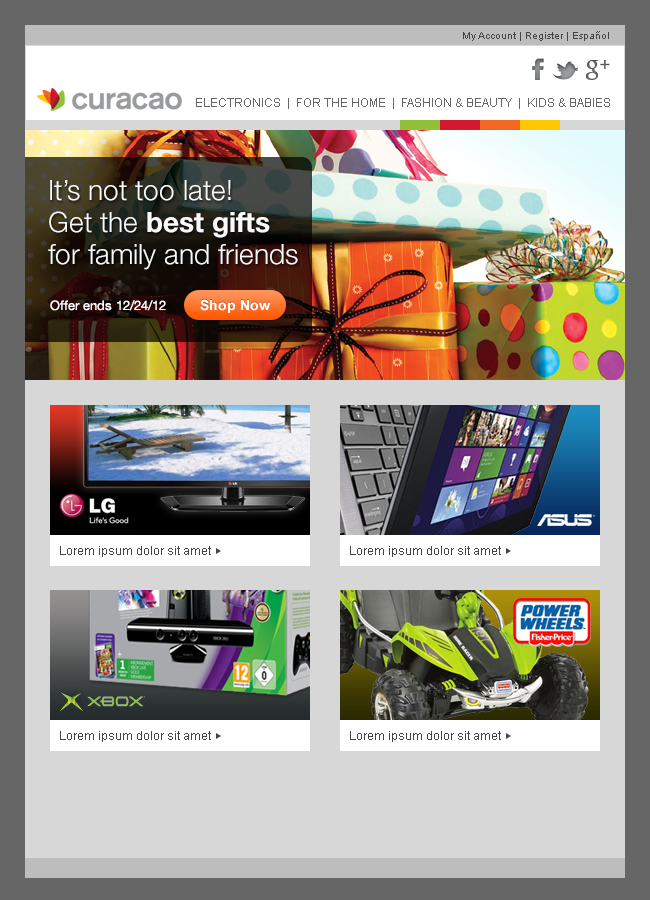
<style>
.page{position:relative;width:650px;height:900px;background:#d7d7d7}
.page>*{position:absolute;margin:0}
.t1{font:10px "ArialMT";color:#444444}
.t2{font:12px "ArialMT";color:#666666}
.t3{font:28px/32px "HelveticaNeue-Light";color:#ffffff}
.t4{font:28px/32px "HelveticaNeue-Bold";color:#ffffff}
.t5{font:13px "HelveticaNeue-Roman";color:#ffffff}
.t6{font:12px "ArialMT";color:#444444}
</style>
<div class="page">
<p class="t1" style="left:463px;top:31px;width:146px;height:10px">My Account | Register | Español</p>
<p class="t2" style="left:196px;top:98px;width:414px;height:11px">ELECTRONICS  |  FOR THE HOME  |  FASHION &amp; BEAUTY  |  KIDS &amp; BABIES</p>
<p class="t3" style="left:48px;top:180px;width:250px;height:90px;opacity:0.97">It’s not too late! <br>Get the <span class="t4">best gifts </span>for family and friends</p>
<p class="t5" style="left:50px;top:300px;width:116px;height:11px">Offer ends 12/24/12</p>
<p class="t6" style="left:60px;top:546px;width:151px;height:11px">Lorem ipsum dolor sit amet</p>
<p class="t6" style="left:350px;top:546px;width:151px;height:11px">Lorem ipsum dolor sit amet</p>
<p class="t6" style="left:60px;top:731px;width:151px;height:11px">Lorem ipsum dolor sit amet</p>
<p class="t6" style="left:350px;top:731px;width:151px;height:11px">Lorem ipsum dolor sit amet</p>
</div>
